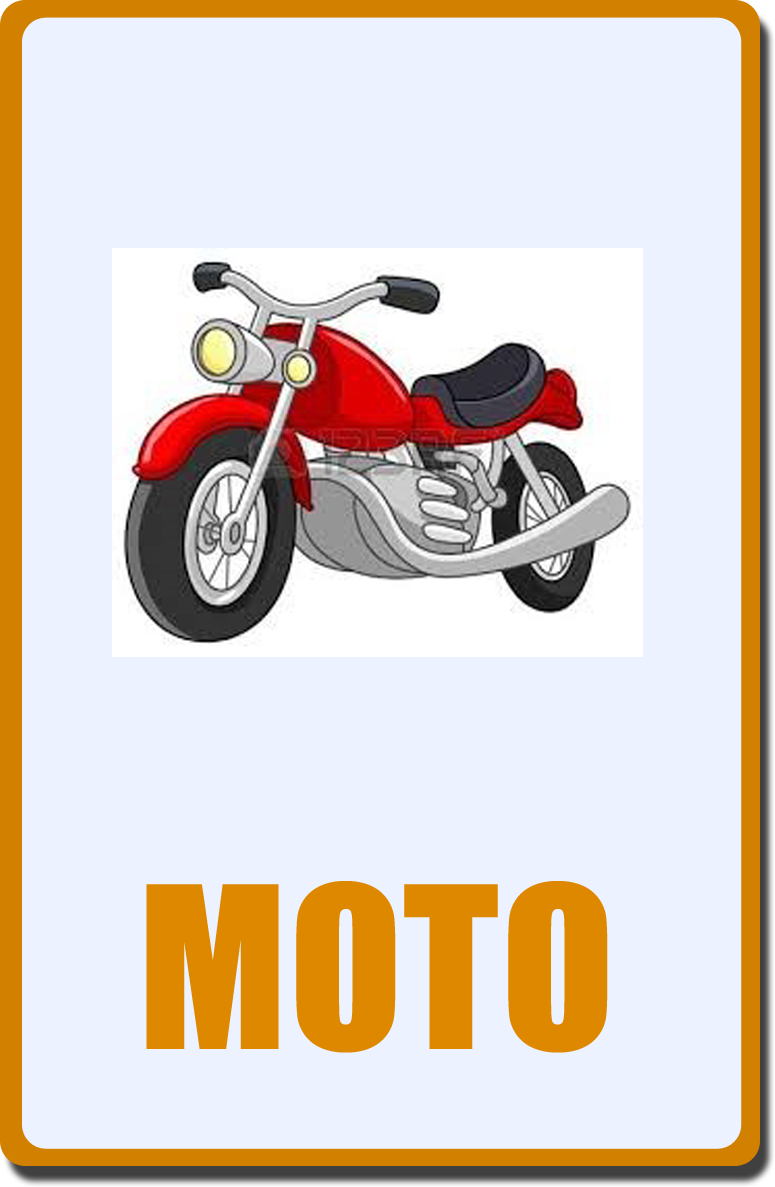
<style>
.page{position:relative;width:775px;height:1187px;background:#ecf2ff}
.page>*{position:absolute;margin:0}
.t1{font:208.3px "Impact";letter-spacing:0.005em;color:#de8800}
</style>
<div class="page">
<p class="t1" style="left:146px;top:881px;width:462px;height:172px">MOTO</p>
</div>
